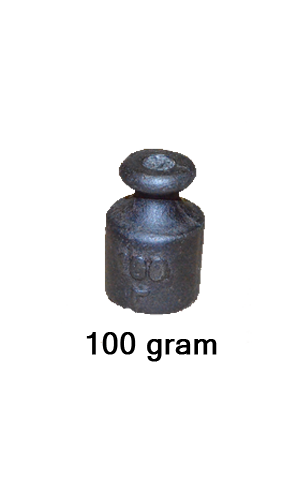
<style>
.page{position:relative;width:300px;height:500px;background:#ffffff}
.page>*{position:absolute;margin:0}
.t1{font:30px "MicrosoftSansSerif";color:#000000;font-weight:bold}
</style>
<div class="page">
<p class="t1" style="left:86px;top:332px;width:131px;height:30px">100 gram</p>
</div>
